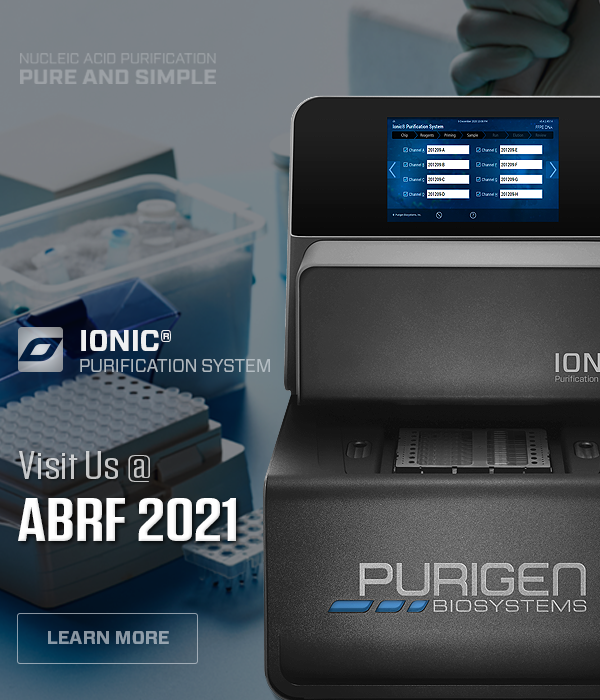
<style>
.page{position:relative;width:600px;height:700px}
.page>*{position:absolute;margin:0}
.t1{font:17.9px/20.2px "Forza-Book";letter-spacing:-0.01em;color:#b9c2c8;text-transform:uppercase}
.t2{font:29.2px/20.2px "Forza-Bold";letter-spacing:-0.01em;color:#ffffff;text-transform:uppercase}
.t3{font:39px "Tungsten-Book";color:#c5c6c7;scale:1.35 1}
.t4{font:60.4px "Tungsten-Semibold";color:#ffffff;scale:1.31 1}
.t5{font:18.8px "Forza-Bold";letter-spacing:-0.01em;color:#8a99a6;text-transform:uppercase}
</style>
<div class="page">
<p class="t1" style="left:80px;top:330px;width:190px;height:42px;opacity:0.9"><span class="t2">Ionic®<br></span>Purification System</p>
<p class="t3" style="left:19px;top:451px;width:131px;height:31px">Visit Us @</p>
<p class="t4" style="left:18px;top:498px;width:218px;height:43px">ABRF 2021</p>
<p class="t5" style="left:48px;top:631px;width:121px;height:13px">Learn More</p>
</div>
